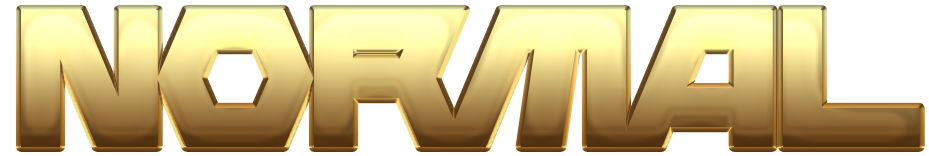
<style>
.page{position:relative;width:929px;height:156px;background:#ffffff}
.page>*{position:absolute;margin:0}
.t1{font:200px "Diagon"}
</style>
<div class="page">
<p class="t1" style="left:21px;top:10px;width:899px;height:137px">NORMAL</p>
</div>
